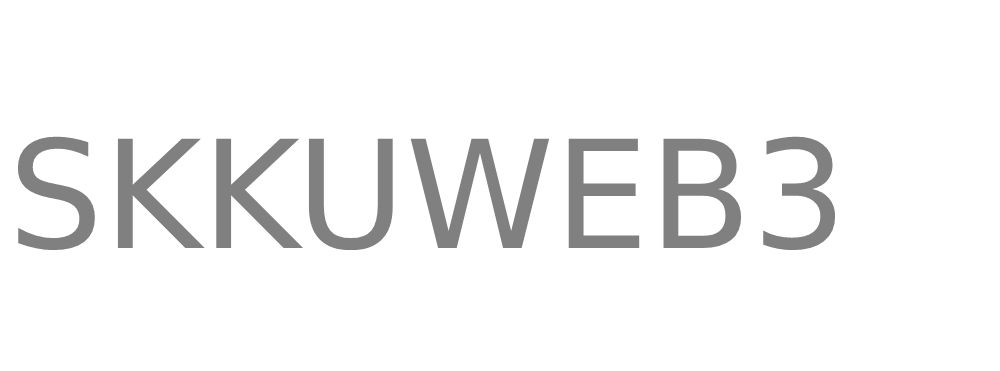
<style>
.page{position:relative;width:1000px;height:371px;background:#ffffff}
.page>*{position:absolute;margin:0}
.t1{font:150px "DejaVuSans";color:#808080}
</style>
<div class="page">
<p class="t1" style="left:17px;top:136px;width:819px;height:115px">SKKUWEB3</p>
</div>
